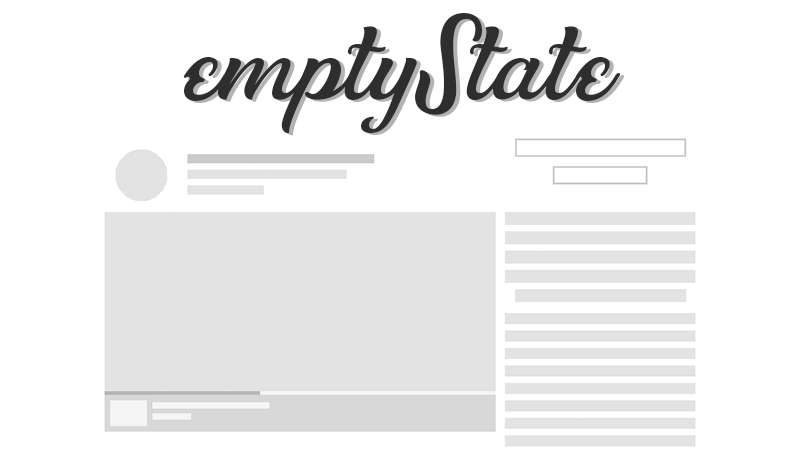
<style>
.page{position:relative;width:800px;height:450px;background:#ffffff}
.page>*{position:absolute;margin:0}
.t1{font:118.1px "ClarksonScript-Regular";color:#2e2e2e}
</style>
<div class="page">
<p class="t1" style="left:183px;top:13px;width:437px;height:121px">emptyState</p>
</div>
